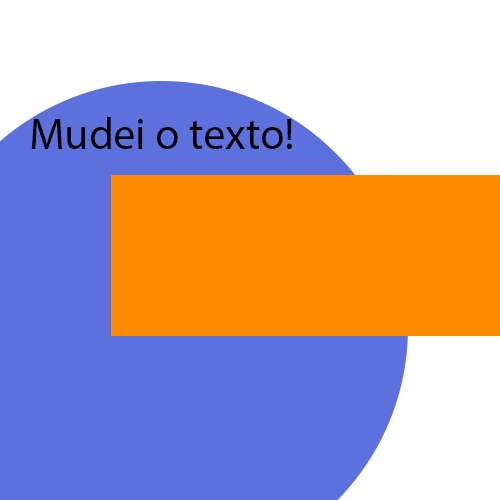
<style>
.page{position:relative;width:500px;height:500px;background:#5c71dd}
.page>*{position:absolute;margin:0}
.t1{font:44px "MyriadPro-Regular";color:#000000}
</style>
<div class="page">
<p class="t1" style="left:31px;top:117px;width:261px;height:32px">Mudei o texto!</p>
</div>
